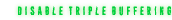
<style>
.page{position:relative;width:172px;height:20px;background:#ffffff}
.page>*{position:absolute;margin:0}
.t1{font:12px "Sunzoomspark";color:#00d03b}
</style>
<div class="page">
<p class="t1" style="left:18px;top:6px;width:153px;height:10px">D I S A B L E  T R I P L E  B U F F E R I N G</p>
</div>
